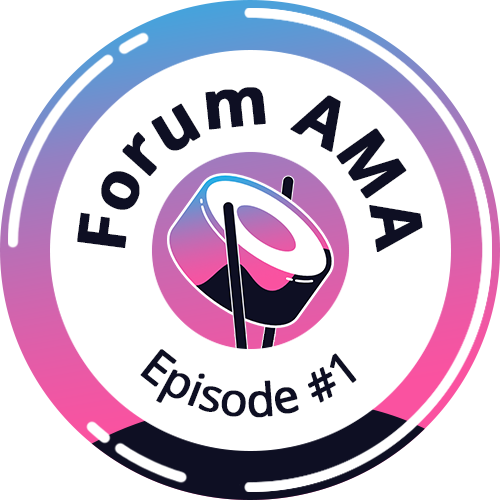
<style>
.page{position:relative;width:500px;height:500px;background:#ffffff}
.page>*{position:absolute;margin:0}
.t1{font:66.7px "NotoSans-Bold";color:#0e0f23;font-weight:bold}
.t2{font:45.8px "NotoSans";color:#0e0f23;font-weight:bold}
</style>
<div class="page">
<p class="t1" style="left:77px;top:87px;width:346px;height:165px;text-align:center">Forum AMA</p>
<p class="t2" style="left:140px;top:349px;width:217px;height:69px">Episode #1</p>
</div>
